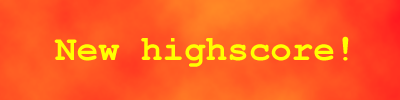
<style>
.page{position:relative;width:400px;height:100px}
.page>*{position:absolute;margin:0}
.t1{font:35.9px "CourierNewPS-BoldMT";color:#ffff00}
</style>
<div class="page">
<p class="t1" style="left:54px;top:36px;width:295px;height:31px">New highscore!</p>
</div>
